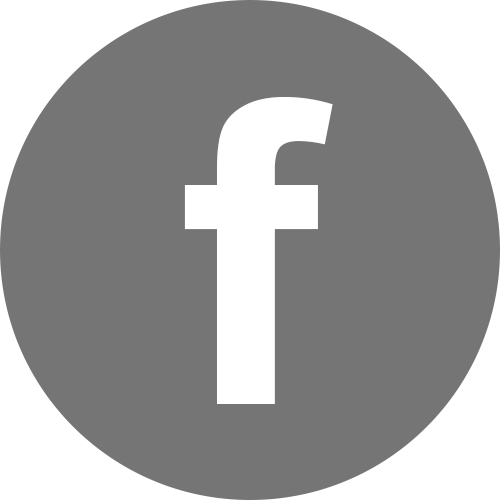
<style>
.page{position:relative;width:500px;height:500px;background:#757575}
.page>*{position:absolute;margin:0}
.t1{font:421px "Arial-BoldMT";color:#ffffff}
</style>
<div class="page">
<p class="t1" style="left:184px;top:97px;width:149px;height:307px">f</p>
</div>
